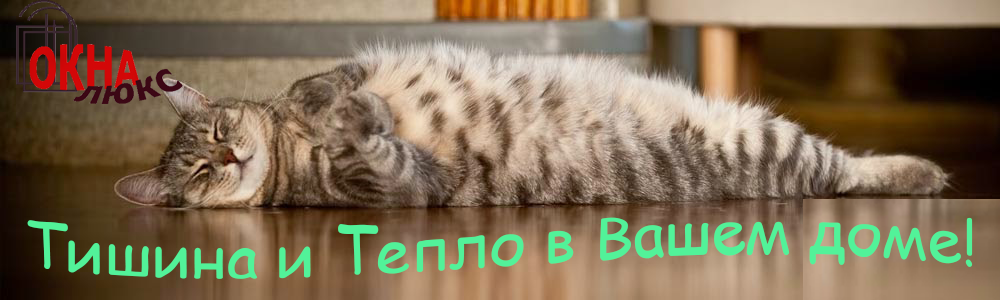
<style>
.page{position:relative;width:1000px;height:300px}
.page>*{position:absolute;margin:0}
.t1{font:60px "ComicSansMS";color:#52f299}
</style>
<div class="page">
<p class="t1" style="left:27px;top:217px;width:946px;height:62px">Тишина и Тепло в Вашем доме!</p>
</div>
